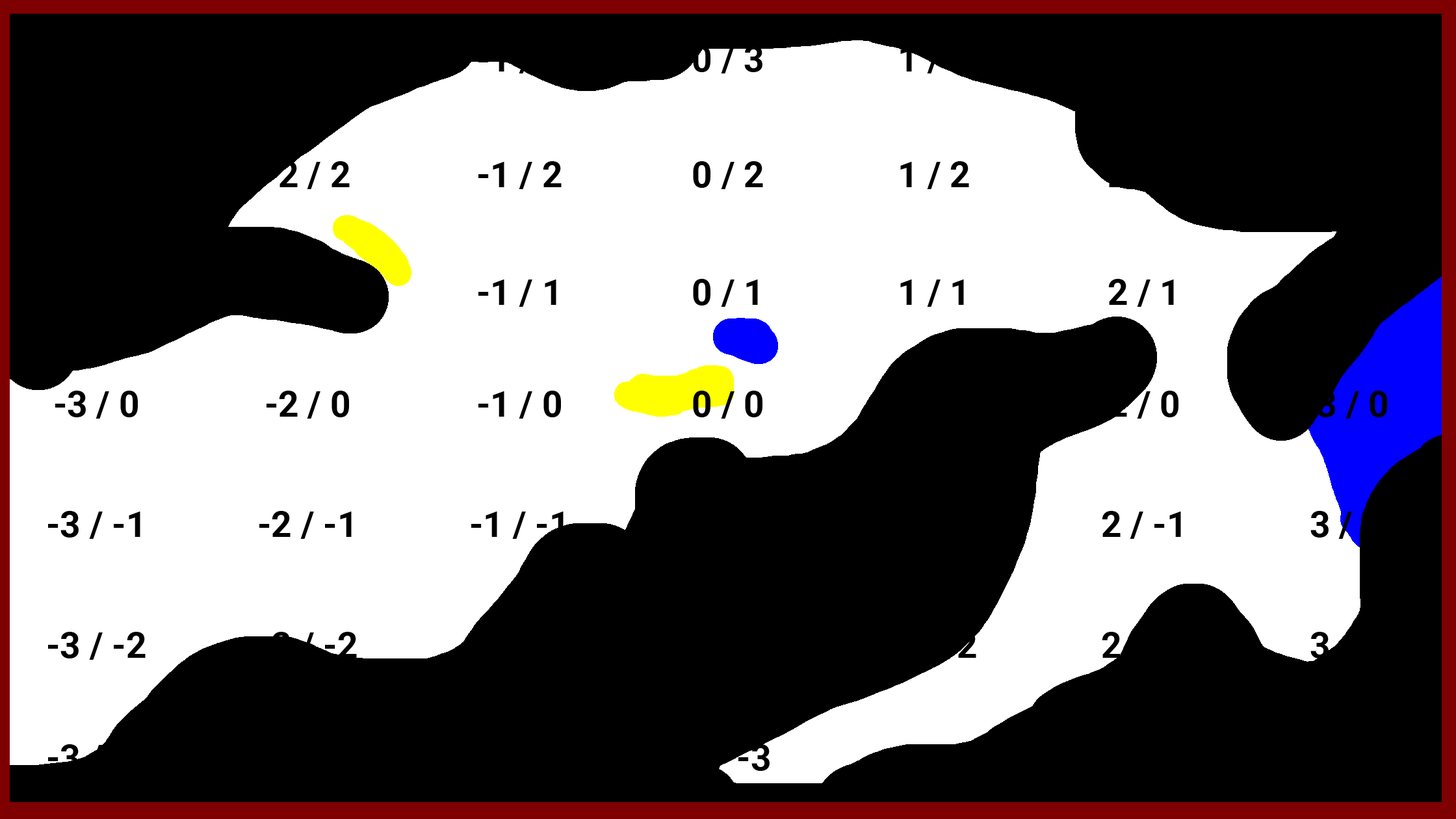
<style>
.page{position:relative;width:1456px;height:819px;background:#000000}
.page>*{position:absolute;margin:0}
.t1{font:35.9px "Roboto-Bold";color:#000000}
</style>
<div class="page">
<p class="t1" style="left:693px;top:45px;width:69px;height:28px">0 / 3</p>
<p class="t1" style="left:900px;top:45px;width:68px;height:28px">1 / 3</p>
<p class="t1" style="left:266px;top:161px;width:84px;height:28px">-2 / 2</p>
<p class="t1" style="left:478px;top:161px;width:84px;height:28px">-1 / 2</p>
<p class="t1" style="left:693px;top:161px;width:70px;height:28px">0 / 2</p>
<p class="t1" style="left:900px;top:161px;width:69px;height:28px">1 / 2</p>
<p class="t1" style="left:478px;top:279px;width:78px;height:28px">-1 / 1</p>
<p class="t1" style="left:693px;top:279px;width:65px;height:28px">0 / 1</p>
<p class="t1" style="left:900px;top:279px;width:64px;height:28px">1 / 1</p>
<p class="t1" style="left:1108px;top:279px;width:66px;height:28px">2 / 1</p>
<p class="t1" style="left:55px;top:391px;width:83px;height:28px">-3 / 0</p>
<p class="t1" style="left:266px;top:391px;width:83px;height:28px">-2 / 0</p>
<p class="t1" style="left:478px;top:391px;width:83px;height:28px">-1 / 0</p>
<p class="t1" style="left:693px;top:391px;width:69px;height:28px">0 / 0</p>
<p class="t1" style="left:1108px;top:391px;width:70px;height:28px">2 / 0</p>
<p class="t1" style="left:1317px;top:391px;width:70px;height:28px">3 / 0</p>
<p class="t1" style="left:48px;top:511px;width:92px;height:28px">-3 / -1</p>
<p class="t1" style="left:259px;top:511px;width:93px;height:28px">-2 / -1</p>
<p class="t1" style="left:471px;top:512px;width:93px;height:27px">-1 / -1</p>
<p class="t1" style="left:1102px;top:511px;width:79px;height:28px">2 / -1</p>
<p class="t1" style="left:1310px;top:511px;width:80px;height:28px">3 / -1</p>
<p class="t1" style="left:48px;top:632px;width:98px;height:28px">-3 / -2</p>
<p class="t1" style="left:259px;top:632px;width:98px;height:28px">-2 / -2</p>
<p class="t1" style="left:686px;top:744px;width:84px;height:28px">0 / -3</p>
</div>
